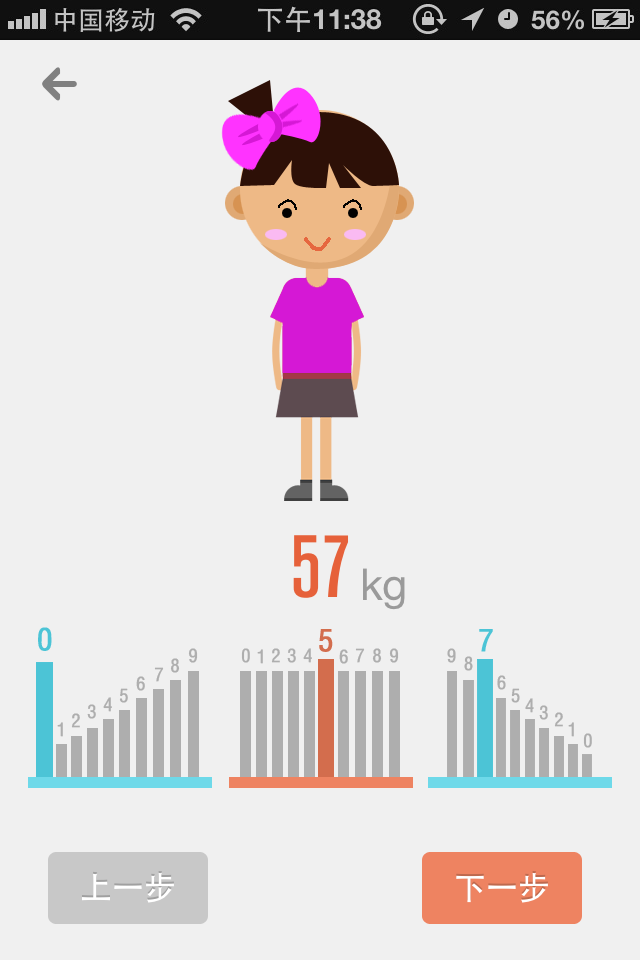
<style>
.page{position:relative;width:640px;height:960px;background:#f0f0f0}
.page>*{position:absolute;margin:0}
.t1{font:30px "CAJ-FNT4A";color:#4cc4d6;font-weight:bold}
.t2{font:30px "CAJ-FNT4A";color:#d36d4d;font-weight:bold}
.t3{font:18px "CAJ-FNT4A";color:#aeaeae;font-weight:bold}
</style>
<div class="page">
<p class="t1" style="left:38px;top:627px;width:14px;height:24px">0</p>
<p class="t2" style="left:319px;top:629px;width:14px;height:23px">5</p>
<p class="t1" style="left:479px;top:629px;width:14px;height:23px">7</p>
<p class="t3" style="left:188px;top:648px;width:10px;height:15px">9</p>
<p class="t3" style="left:241px;top:648px;width:9px;height:15px">0</p>
<p class="t3" style="left:257px;top:649px;width:6px;height:15px">1</p>
<p class="t3" style="left:271px;top:648px;width:9px;height:15px">2</p>
<p class="t3" style="left:287px;top:648px;width:9px;height:15px">3</p>
<p class="t3" style="left:303px;top:648px;width:9px;height:15px">4</p>
<p class="t3" style="left:339px;top:649px;width:9px;height:15px">6</p>
<p class="t3" style="left:355px;top:648px;width:10px;height:15px">7</p>
<p class="t3" style="left:372px;top:648px;width:10px;height:15px">8</p>
<p class="t3" style="left:389px;top:648px;width:10px;height:15px">9</p>
<p class="t3" style="left:447px;top:648px;width:9px;height:15px">9</p>
<p class="t3" style="left:170px;top:658px;width:10px;height:15px">8</p>
<p class="t3" style="left:464px;top:656px;width:9px;height:15px">8</p>
<p class="t3" style="left:136px;top:676px;width:9px;height:15px">6</p>
<p class="t3" style="left:154px;top:667px;width:10px;height:15px">7</p>
<p class="t3" style="left:497px;top:675px;width:9px;height:15px">6</p>
<p class="t3" style="left:119px;top:688px;width:9px;height:15px">5</p>
<p class="t3" style="left:511px;top:688px;width:9px;height:15px">5</p>
<p class="t3" style="left:103px;top:697px;width:9px;height:15px">4</p>
<p class="t3" style="left:525px;top:698px;width:9px;height:15px">4</p>
<p class="t3" style="left:71px;top:713px;width:9px;height:15px">2</p>
<p class="t3" style="left:87px;top:704px;width:9px;height:15px">3</p>
<p class="t3" style="left:539px;top:705px;width:9px;height:15px">3</p>
<p class="t3" style="left:554px;top:712px;width:9px;height:15px">2</p>
<p class="t3" style="left:57px;top:722px;width:6px;height:15px">1</p>
<p class="t3" style="left:568px;top:722px;width:6px;height:15px">1</p>
<p class="t3" style="left:583px;top:733px;width:9px;height:15px">0</p>
</div>
